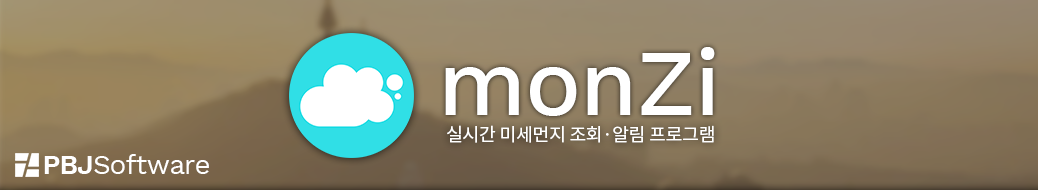
<style>
.page{position:relative;width:1038px;height:190px}
.page>*{position:absolute;margin:0}
.t1{font:93.1px "WorkSans-Medium";letter-spacing:-0.01em;color:#ffffff}
.t2{font:18.2px "NotoSansCJKkr-Regular";letter-spacing:-0.01em;color:#ffffff}
.t3{font:27.9px "WorkSans-Regular";letter-spacing:-0.03em;color:#ffffff}
.t4{font:27.9px "WorkSans-SemiBold";letter-spacing:-0.03em;color:#ffffff}
</style>
<div class="page">
<p class="t1" style="left:445px;top:47px;width:270px;height:69px">monZi</p>
<p class="t2" style="left:447px;top:125px;width:267px;height:18px">실시간 미세먼지 조회·알림 프로그램</p>
<p class="t3" style="left:44px;top:154px;width:165px;height:20px"><span class="t4">PBJ</span>Software</p>
</div>
